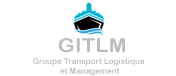
<style>
.page{position:relative;width:176px;height:76px;background:#ffffff}
.page>*{position:absolute;margin:0}
.t1{font:19.3px "ArialRoundedMTBold";color:#bdbdbb;scale:1.13 1}
.t2{font:8px "ArialRoundedMTBold";color:#bdbdbb}
</style>
<div class="page">
<p class="t1" style="left:58px;top:38px;width:67px;height:15px">GITLM</p>
<p class="t2" style="left:33px;top:58px;width:112px;height:18px;text-align:center">Groupe Transport Logistique<br> et Management</p>
</div>
